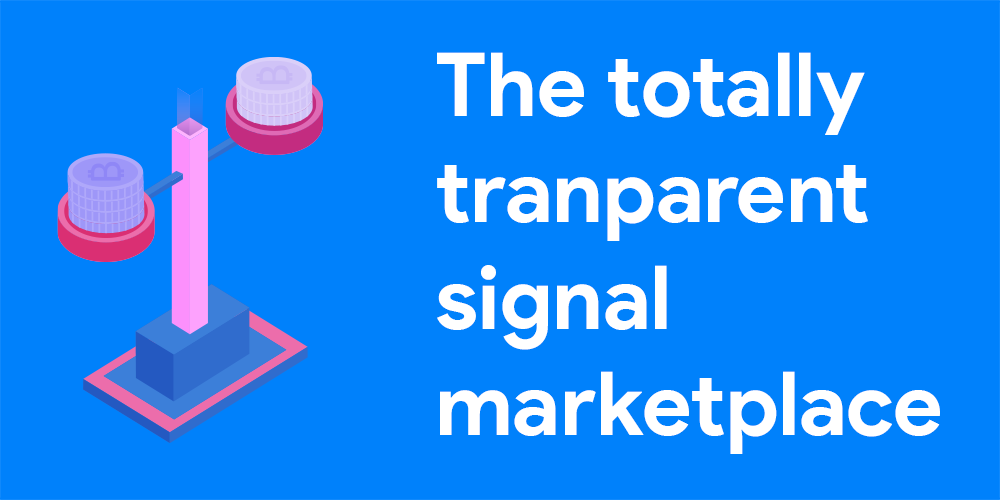
<style>
.page{position:relative;width:1000px;height:500px;background:#0081fb}
.page>*{position:absolute;margin:0}
.t1{font:88.6px "ProductSans-Bold";color:#ffffff}
</style>
<div class="page">
<p class="t1" style="left:437px;top:52px;width:503px;height:402px">The totally<br>tranparent<br>signal <br>marketplace</p>
</div>
